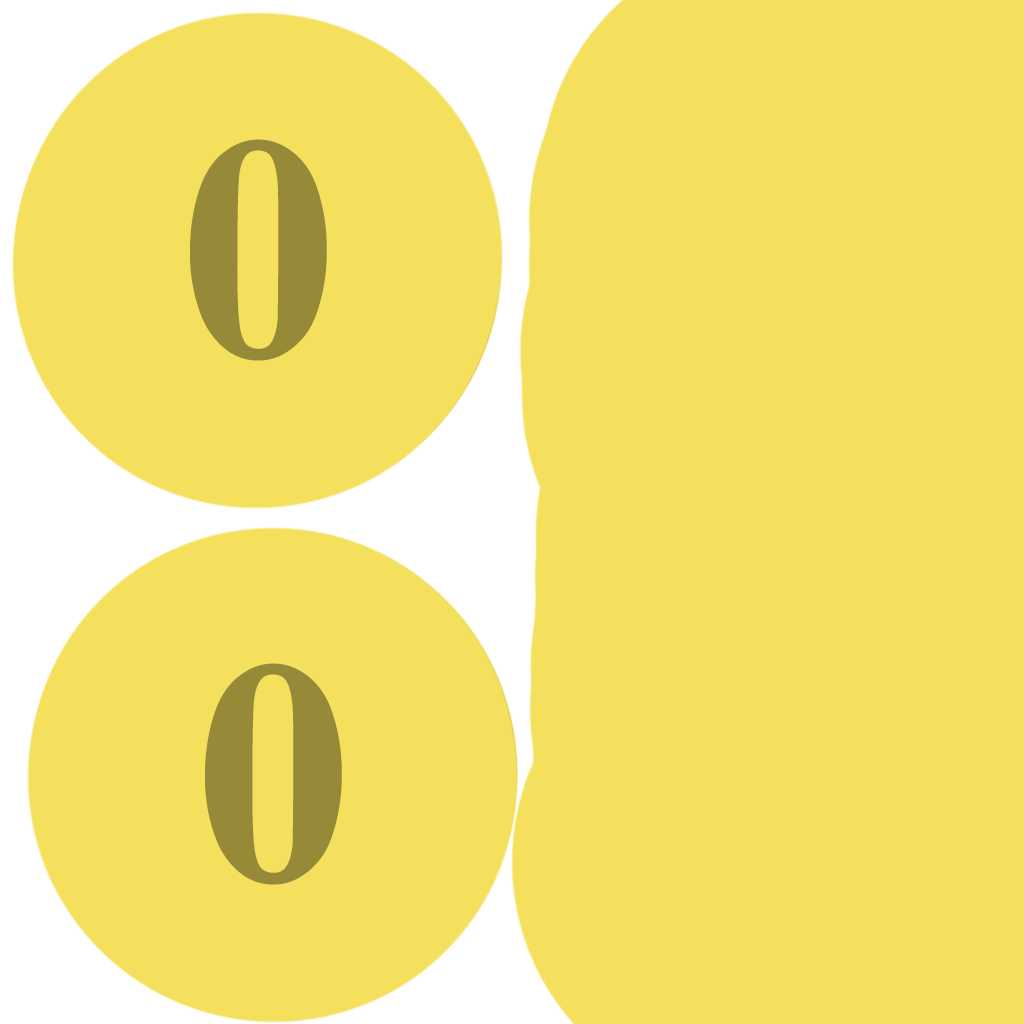
<style>
.page{position:relative;width:1024px;height:1024px;background:#f4e05d}
.page>*{position:absolute;margin:0}
.t1{font:320px "TimesNewRomanPS-BoldMT";letter-spacing:-0.02em;color:#968a39}
.t2{font:24px "TimesNewRomanPS-BoldMT";letter-spacing:-0.02em;color:#968a39}
</style>
<div class="page">
<p class="t1" style="left:189px;top:139px;width:138px;height:222px"><span class="t2"><br><br><br><br><br><br><br><br><br><br><br><br><br><br><br><br><br><br><br><br><br><br><br><br><br><br><br><br><br><br><br><br><br><br></span><br><br><br><br><br>0</p>
<p class="t1" style="left:204px;top:663px;width:138px;height:222px"><span class="t2"><br><br><br><br><br><br><br><br><br><br><br><br><br><br><br><br><br><br><br><br><br><br><br><br><br><br><br><br><br><br><br><br><br><br></span><br><br><br><br><br>0</p>
</div>
